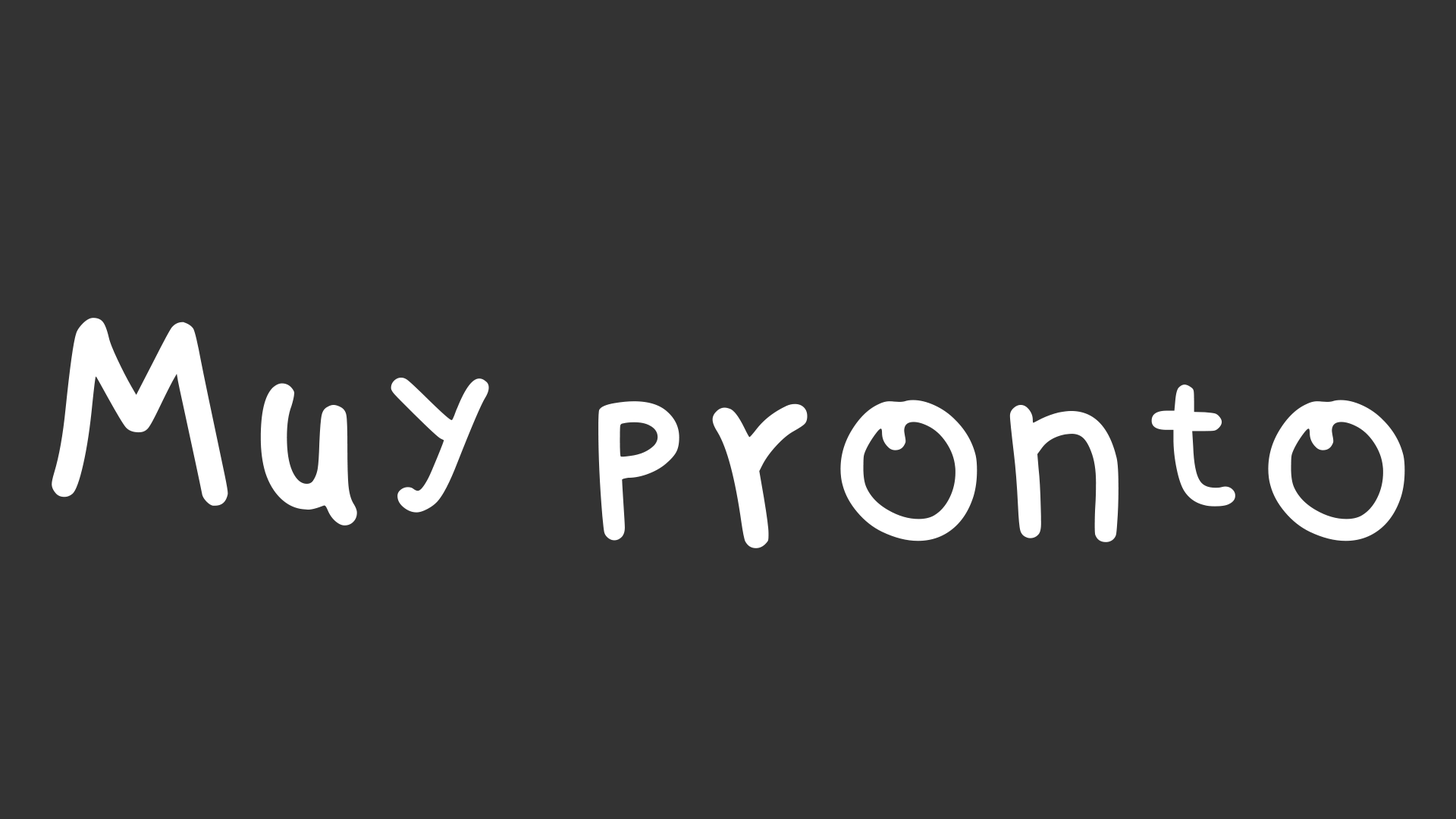
<style>
.page{position:relative;width:1456px;height:819px;background:#333333}
.page>*{position:absolute;margin:0}
.t1{font:303.3px "Brutal_bounce-Regular";color:#ffffff}
</style>
<div class="page">
<p class="t1" style="left:52px;top:318px;width:1353px;height:230px">Muy pronto</p>
</div>
